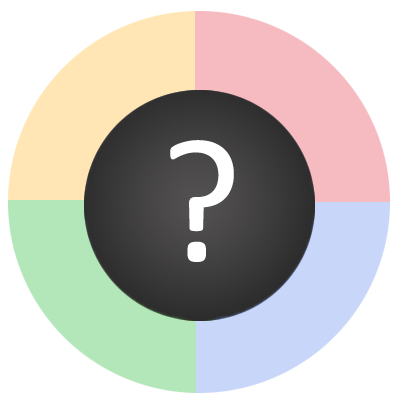
<style>
.page{position:relative;width:400px;height:400px;background:#ffffff}
.page>*{position:absolute;margin:0}
.t1{font:180px "Calibri";letter-spacing:-0.035em;color:#ffffff}
</style>
<div class="page">
<p class="t1" style="left:170px;top:140px;width:64px;height:122px">?</p>
</div>
